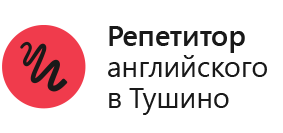
<style>
.page{position:relative;width:283px;height:133px;background:#ffffff}
.page>*{position:absolute;margin:0}
.t1{font:29.2px/31.3px "SegoeProDisplay";color:#191919}
.t2{font:29.2px/31.3px "SegoeProDisplay-Semibold";color:#191919}
</style>
<div class="page">
<p class="t1" style="left:108px;top:26px;width:159px;height:89px"><span class="t2">Репетитор<br></span>английского<br>в Тушино</p>
</div>
